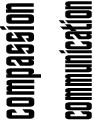
<style>
.page{position:relative;width:94px;height:120px;background:#ffffff}
.page>*{position:absolute;margin:0}
.t1{font:50px "FinalFrontierOldStyle";color:#000000;scale:0.63 1}
.t2{font:47.6px "FinalFrontierOldStyle";color:#000000;scale:0.53 1}
</style>
<div class="page">
<p class="t1" style="left:0px;top:3px;width:41px;height:116px;rotate:-90deg">compassion</p>
<p class="t2" style="left:58px;top:1px;width:34px;height:119px;rotate:-90deg">communication</p>
</div>
